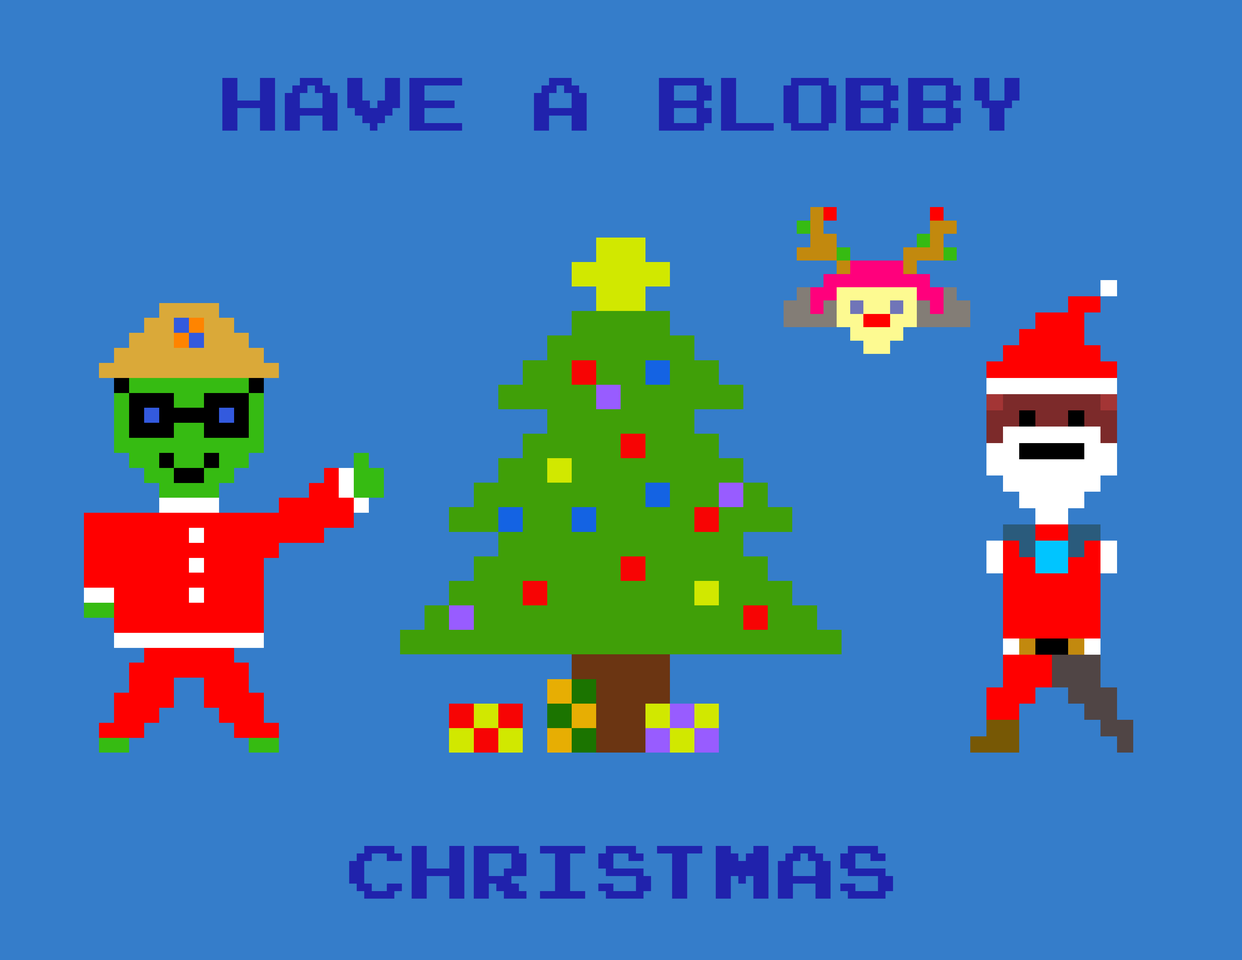
<style>
.page{position:relative;width:1242px;height:960px;background:#357dca}
.page>*{position:absolute;margin:0}
.t1{font:75.3px "JoystixMonospace-Regular";color:#2022ac}
</style>
<div class="page">
<p class="t1" style="left:222px;top:78px;width:798px;height:53px">Have A Blobby</p>
<p class="t1" style="left:349px;top:846px;width:544px;height:53px">Christmas</p>
</div>
